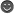
<style>
.page{position:relative;width:14px;height:14px;background:#575757}
.page>*{position:absolute;margin:0}
.t1{font:20px "AppleSymbols";color:#575757}
</style>
<div class="page">
<p class="t1" style="left:0px;top:0px;width:14px;height:14px">☻</p>
</div>
